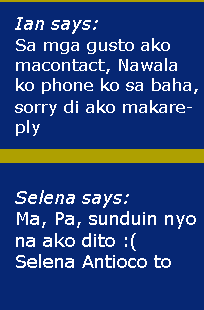
<style>
.page{position:relative;width:204px;height:310px;background:#062774}
.page>*{position:absolute;margin:0}
.t1{font:17px "Verdana";color:#ffffff}
.t2{font:18px "Verdana-Italic";color:#ffffff}
.t3{font:18px "Verdana";color:#ffffff}
</style>
<div class="page">
<p class="t1" style="left:15px;top:17px;width:183px;height:119px"><span class="t2">Ian says:<br></span>Sa mga gusto ako macontact, Nawala ko phone ko sa baha, sorry di ako makareply</p>
<p class="t3" style="left:15px;top:190px;width:181px;height:78px"><span class="t2">Selena says: <br></span>Ma, Pa, sunduin nyo na ako dito :( Selena Antioco to</p>
</div>
